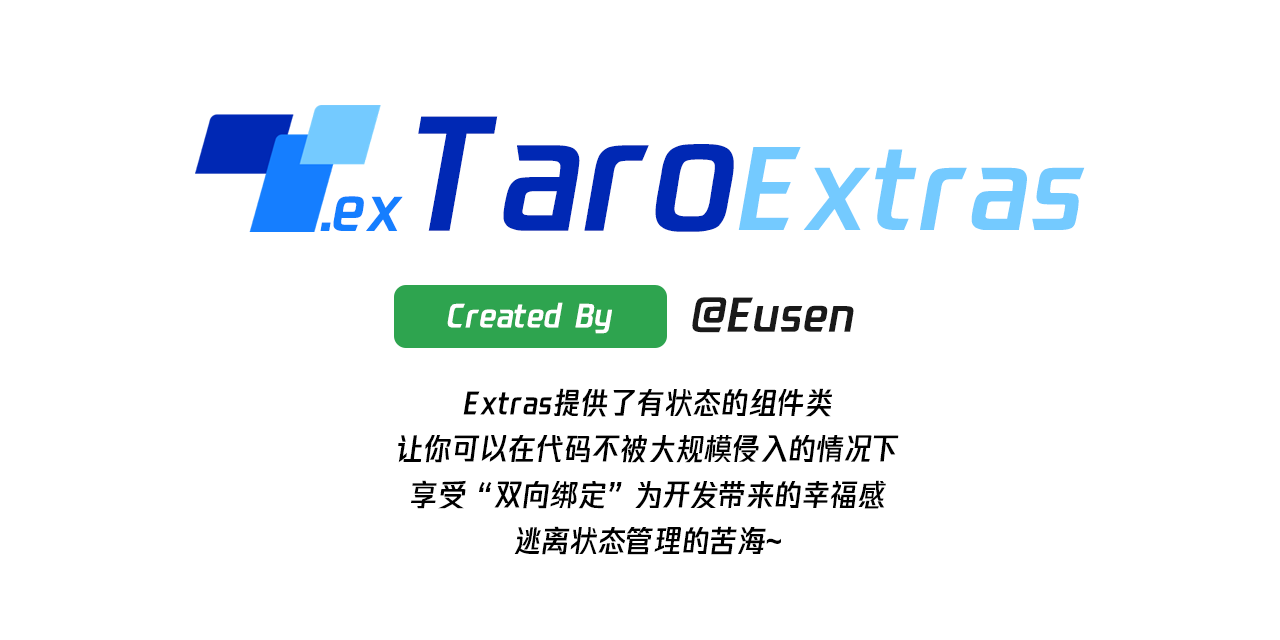
<style>
.page{position:relative;width:1280px;height:640px;background:#ffffff}
.page>*{position:absolute;margin:0}
.t1{font:109.4px "FontName";color:#74caff}
.t2{font:150.3px "FontName";color:#0028b4}
.t3{font:60px "FontName";color:#157eff}
.t4{font:31px "FontName";color:#ffffff}
.t5{font:45px "FontName";color:#191919}
.t6{font:30.2px/46px "FontName";color:#000000;scale:0.93 1}
</style>
<div class="page">
<p class="t1" style="left:418px;top:116px;width:667px;height:116px"><span class="t2">Taro</span>Extras</p>
<p class="t3" style="left:320px;top:196px;width:83px;height:35px">.ex</p>
<p class="t4" style="left:447px;top:302px;width:165px;height:32px">Created By</p>
<p class="t5" style="left:692px;top:297px;width:162px;height:36px">@Eusen</p>
<p class="t6" style="left:398px;top:388px;width:501px;height:167px;text-align:center">Extras提供了有状态的组件类<br>让你可以在代码不被大规模侵入的情况下<br>享受“双向绑定”为开发带来的幸福感<br>逃离状态管理的苦海~</p>
</div>
